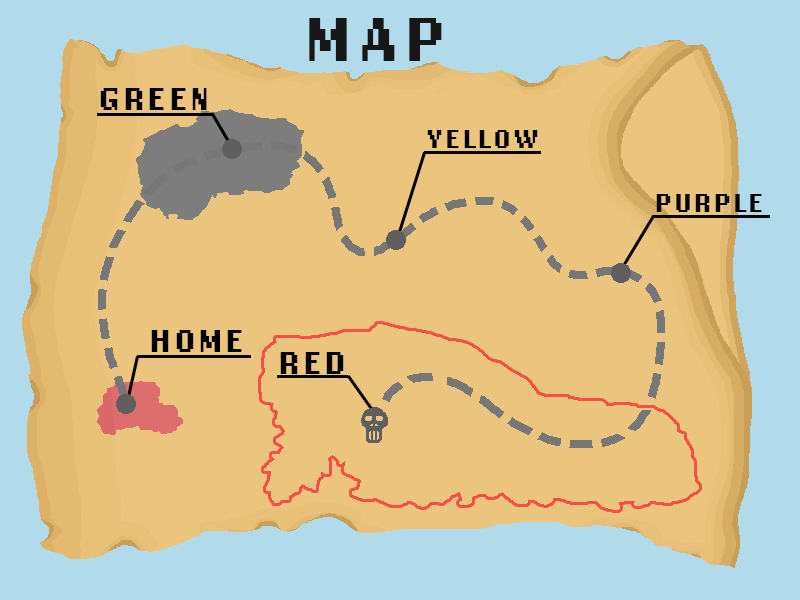
<style>
.page{position:relative;width:800px;height:600px;background:#ebc47e}
.page>*{position:absolute;margin:0}
.t1{font:64.5px "LoRes12OT-Bold";letter-spacing:0.07em;color:#171717}
.t2{font:33.1px "LoRes12OT-Bold";letter-spacing:0.07em;color:#000000}
.t3{font:26.7px "LoRes12OT-Bold";letter-spacing:0.07em;color:#000000}
</style>
<div class="page">
<p class="t1" style="left:309px;top:18px;width:133px;height:43px">MAP</p>
<p class="t2" style="left:100px;top:88px;width:107px;height:22px">GREEN</p>
<p class="t3" style="left:427px;top:130px;width:111px;height:18px">YELLOW</p>
<p class="t3" style="left:656px;top:194px;width:106px;height:18px">PURPLE</p>
<p class="t2" style="left:151px;top:330px;width:91px;height:22px">HOME</p>
<p class="t2" style="left:280px;top:352px;width:64px;height:22px">RED</p>
</div>
